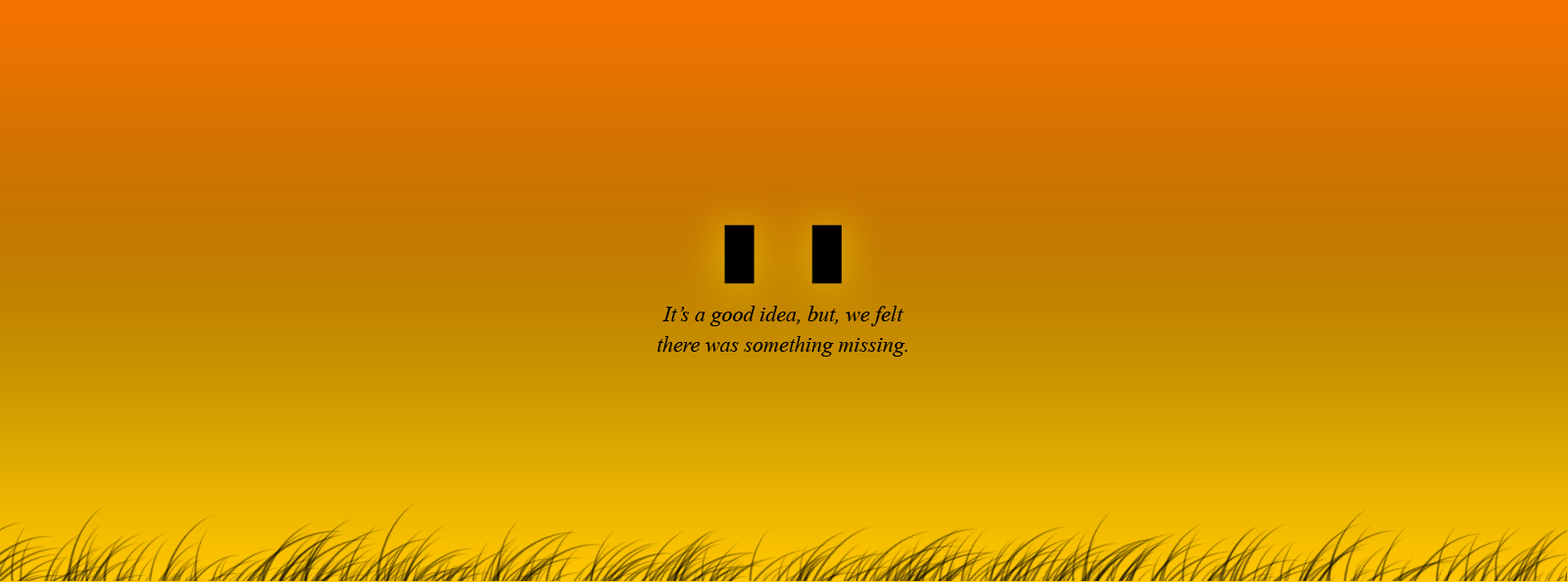
<style>
.page{position:relative;width:1568px;height:582px}
.page>*{position:absolute;margin:0}
.t1{font:21.6px/30.4px "TimesNewRomanPS-ItalicMT";color:#000000}
</style>
<div class="page">
<p class="t1" style="left:658px;top:306px;width:249px;height:51px;text-align:center">It’s a good idea, but, we felt there was something missing.</p>
</div>
